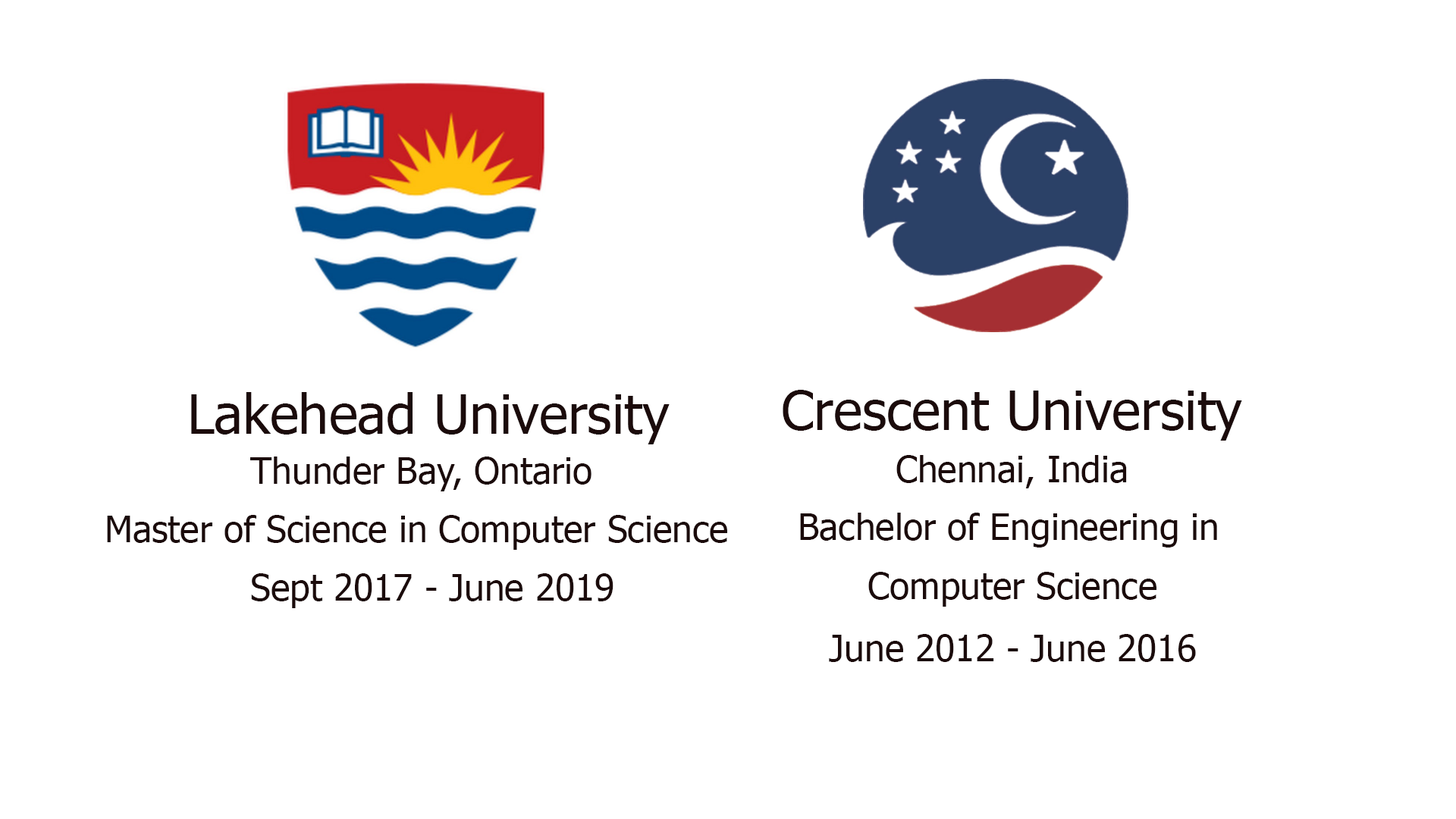
<style>
.page{position:relative;width:1456px;height:819px;background:#ffffff}
.page>*{position:absolute;margin:0}
.t1{font:54.6px "Tahoma";color:#1b0b0b}
.t2{font:36.4px "Tahoma";color:#1b0b0b}
</style>
<div class="page">
<p class="t1" style="left:783px;top:390px;width:459px;height:51px">Crescent University</p>
<p class="t1" style="left:191px;top:392px;width:479px;height:52px">Lakehead University</p>
<p class="t2" style="left:250px;top:457px;width:341px;height:34px">Thunder Bay, Ontario</p>
<p class="t2" style="left:896px;top:455px;width:231px;height:33px">Chennai, India</p>
<p class="t2" style="left:107px;top:515px;width:620px;height:35px">Master of Science in Computer Science</p>
<p class="t2" style="left:800px;top:513px;width:417px;height:35px">Bachelor of Engineering in</p>
<p class="t2" style="left:251px;top:573px;width:362px;height:35px">Sept 2017 - June 2019</p>
<p class="t2" style="left:868px;top:572px;width:288px;height:35px">Computer Science</p>
<p class="t2" style="left:829px;top:634px;width:367px;height:28px">June 2012 - June 2016</p>
</div>
